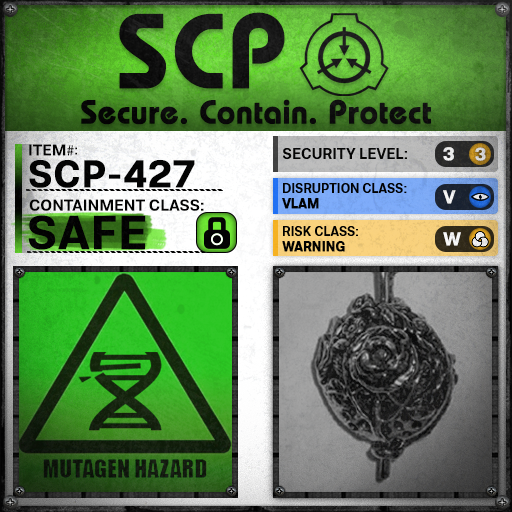
<style>
.page{position:relative;width:512px;height:512px}
.page>*{position:absolute;margin:0}
.t1{font:105.8px "BauhausLT-Demi";color:#000000;font-weight:bold}
.t2{font:33px "BauhausLT-Demi";color:#000000;font-weight:bold}
.t3{font:15.7px "Molde-Semibold";color:#000000}
.t4{font:15.7px "MyriadPro-Regular";color:#000000}
.t5{font:13.7px "Molde-Semibold";color:#000000}
.t6{font:15px "Molde-Semibold";color:#000000}
.t7{font:18.6px "Molde-Semibold";color:#ffffff;font-weight:bold}
.t8{font:17.8px "Molde-Semibold";color:#d6d7d7;font-weight:bold}
.t9{font:38.2px "Molde-Semibold";color:#000000;font-weight:bold}
.t10{font:12.8px "Molde-Semibold";color:#000000}
.t11{font:12.8px "Molde-Semibold";color:#000000;font-weight:bold}
.t12{font:15.9px "Molde-Semibold";color:#000000}
.t13{font:47.2px "Molde-Semibold";color:#000000;font-weight:bold}
</style>
<div class="page">
<p class="t1" style="left:119px;top:12px;width:166px;height:77px">SCP</p>
<p class="t2" style="left:81px;top:99px;width:350px;height:26px">Secure. Contain. Protect</p>
<p class="t3" style="left:29px;top:144px;width:45px;height:12px">ITEM<span class="t4">#</span></p>
<p class="t5" style="left:75px;top:147px;width:2px;height:8px">:</p>
<p class="t6" style="left:283px;top:148px;width:124px;height:11px">SECURITY LEVEL:</p>
<p class="t7" style="left:443px;top:147px;width:11px;height:14px">3</p>
<p class="t8" style="left:475px;top:147px;width:11px;height:14px">3</p>
<p class="t9" style="left:29px;top:160px;width:166px;height:28px">SCP-427</p>
<p class="t10" style="left:282px;top:183px;width:125px;height:26px">DISRUPTION CLASS:<br><span class="t11">VLAM</span></p>
<p class="t7" style="left:443px;top:190px;width:13px;height:14px">V</p>
<p class="t12" style="left:29px;top:199px;width:175px;height:12px">CONTAINMENT CLASS:</p>
<p class="t13" style="left:28px;top:215px;width:118px;height:35px">SAFE</p>
<p class="t10" style="left:282px;top:226px;width:76px;height:26px">RISK CLASS:<br><span class="t11">WARNING</span></p>
<p class="t7" style="left:443px;top:232px;width:18px;height:14px">W</p>
</div>
